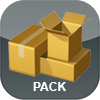
<style>
.page{position:relative;width:100px;height:100px}
.page>*{position:absolute;margin:0}
.t1{font:12px "Arial-BoldMT";color:#ffffff}
</style>
<div class="page">
<p class="t1" style="left:33px;top:82px;width:33px;height:9px">PACK</p>
</div>
